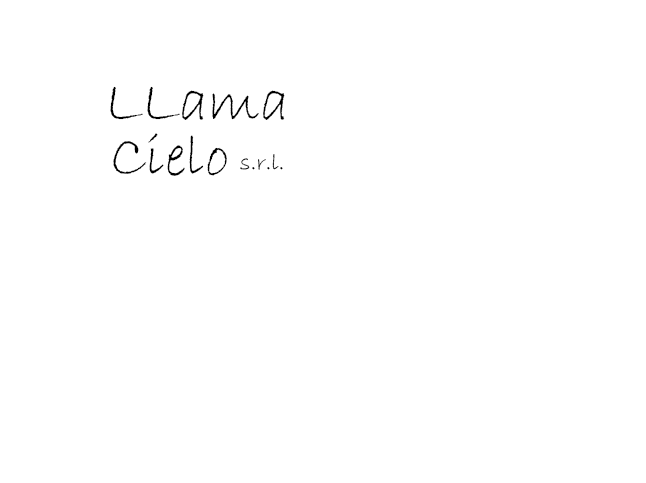
<style>
.page{position:relative;width:646px;height:483px;background:#ffffff}
.page>*{position:absolute;margin:0}
.t1{font:60px "BradleyHandITC";color:#000000}
.t2{font:24px "BradleyHandITC";color:#000000}
</style>
<div class="page">
<p class="t1" style="left:110px;top:86px;width:175px;height:34px">LLama</p>
<p class="t1" style="left:113px;top:133px;width:114px;height:43px">Cielo</p>
<p class="t2" style="left:240px;top:154px;width:43px;height:16px">s.r.l.</p>
</div>
